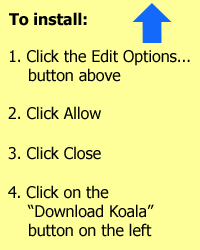
<style>
.page{position:relative;width:200px;height:250px;background:#ffff99}
.page>*{position:absolute;margin:0}
.t1{font:15.9px "Tahoma-Bold";color:#000000}
.t2{font:15.9px "Tahoma";color:#000000}
</style>
<div class="page">
<p class="t1" style="left:9px;top:12px;width:78px;height:14px">To install:</p>
<p class="t2" style="left:10px;top:49px;width:180px;height:33px">1. Click the Edit Options...<br>    button above</p>
<p class="t2" style="left:8px;top:106px;width:93px;height:14px">2. Click Allow</p>
<p class="t2" style="left:8px;top:146px;width:93px;height:14px">3. Click Close</p>
<p class="t2" style="left:8px;top:185px;width:146px;height:52px">4. Click on the<br>    “Download Koala”<br>    button on the left</p>
</div>
